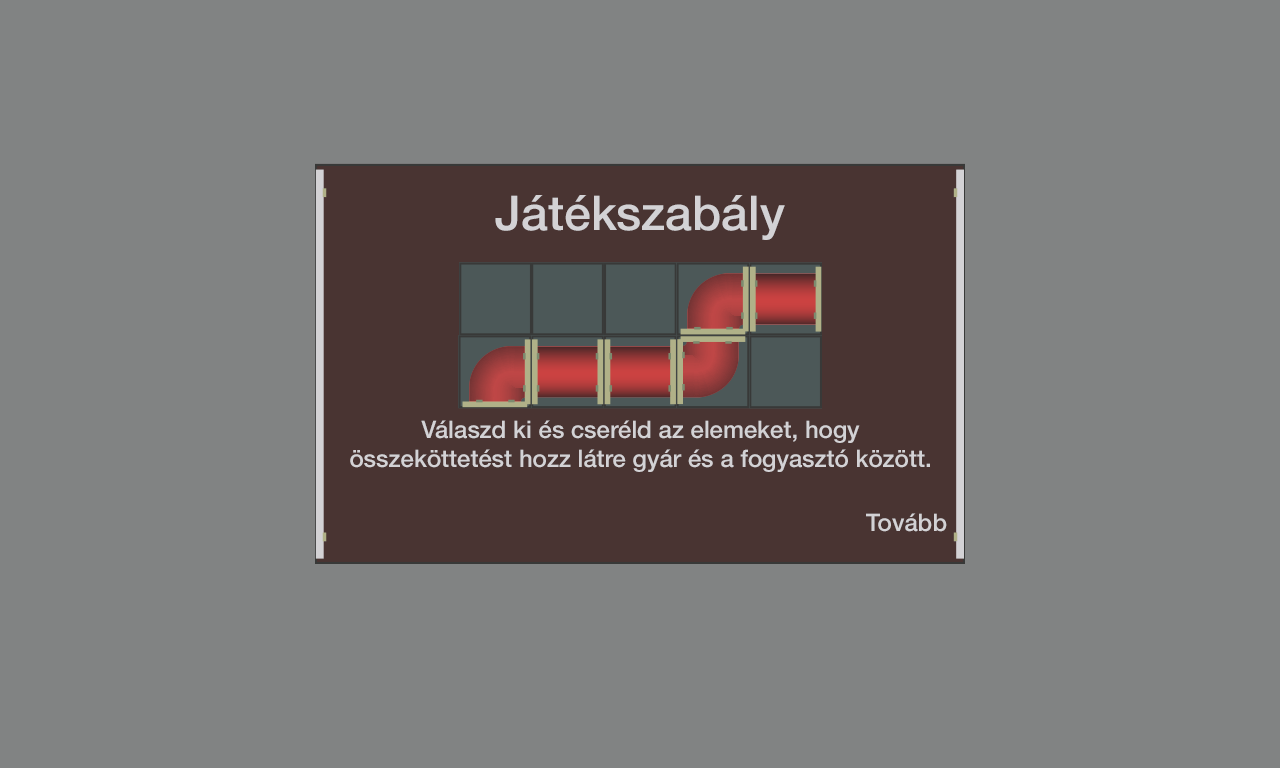
<style>
.page{position:relative;width:1280px;height:768px;background:#818383}
.page>*{position:absolute;margin:0}
.t1{font:48px "HelveticaNeueLTPro-Md";color:#d3d2d5}
.t2{font:24px "HelveticaNeueLTPro-Md";color:#d3d2d5}
</style>
<div class="page">
<p class="t1" style="left:495px;top:195px;width:290px;height:45px">Játékszabály</p>
<p class="t2" style="left:350px;top:420px;width:580px;height:52px;text-align:center">Válaszd ki és cseréld az elemeket, hogy összeköttetést hozz látre gyár és a fogyasztó között.</p>
<p class="t2" style="left:866px;top:513px;width:81px;height:19px">Tovább</p>
</div>
